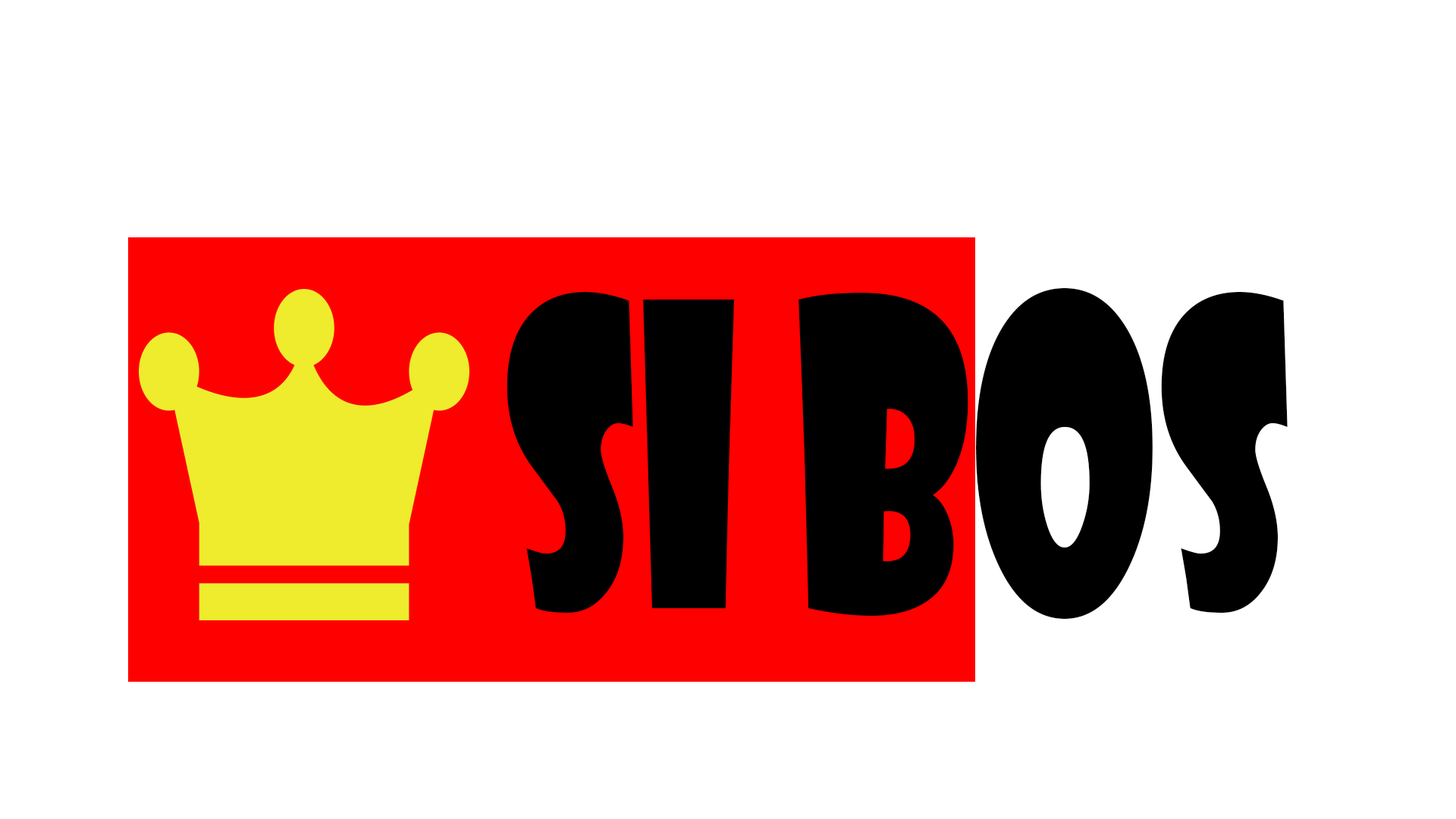
<style>
.page{position:relative;width:1456px;height:819px;background:#ffffff}
.page>*{position:absolute;margin:0}
.t1{font:411.2px "ShowcardGothic-Reg";color:#000000;scale:0.65 1}
</style>
<div class="page">
<p class="t1" style="left:507px;top:288px;width:781px;height:331px">SI BOS</p>
</div>
